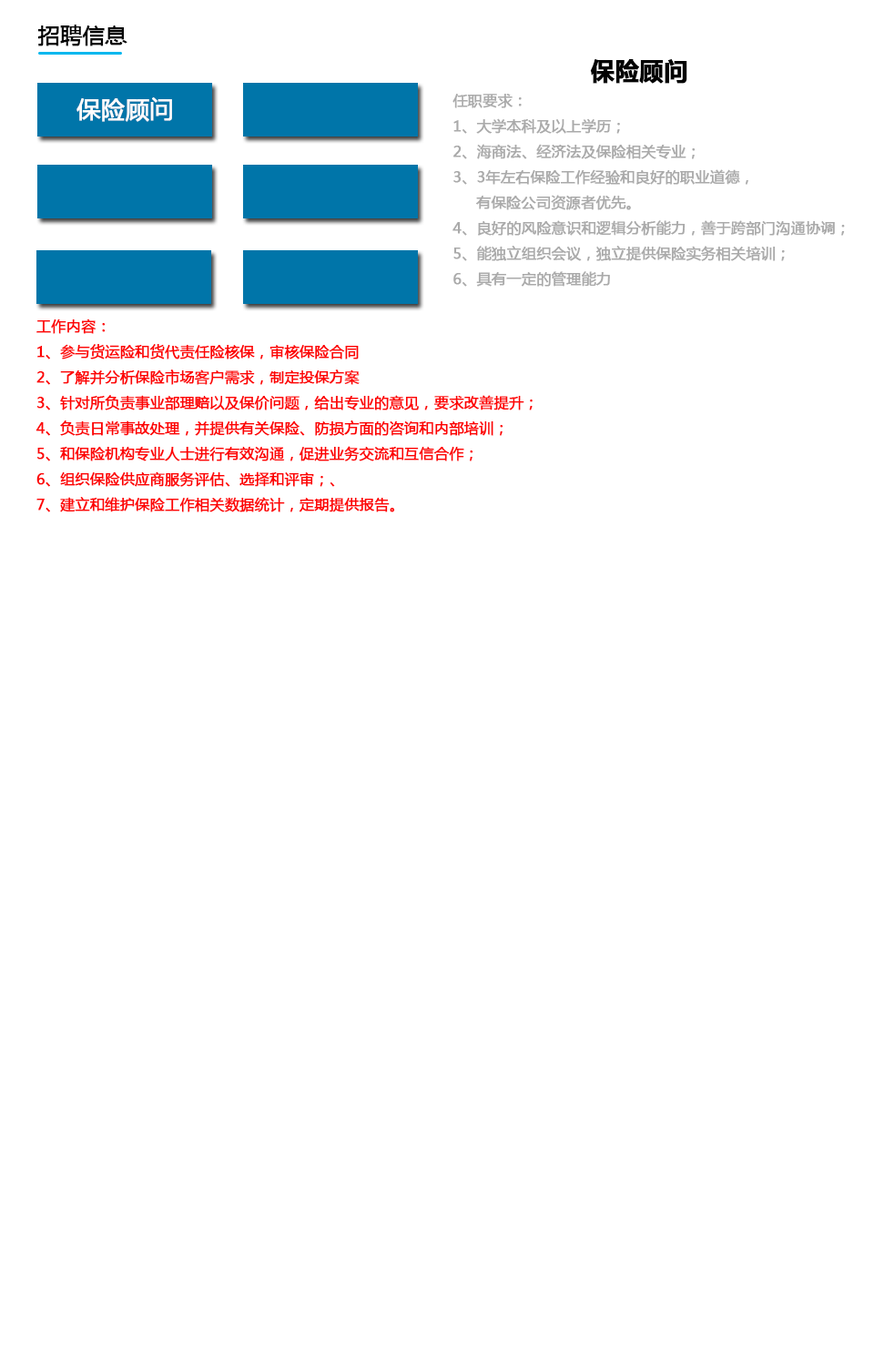
<style>
.page{position:relative;width:874px;height:1365px;background:#ffffff}
.page>*{position:absolute;margin:0}
.t1{font:21.8px "MicrosoftYaHei";color:#020202;font-weight:bold}
.t2{font:23.7px "MicrosoftYaHei-Bold";color:#020202;font-weight:bold}
.t3{font:23.7px "MicrosoftYaHei";color:#fffcfc;font-weight:bold}
.t4{font:14.6px "MicrosoftYaHei";color:#aaaaaa;font-weight:bold}
.t5{font:14.6px "MicrosoftYaHei";color:#fd0202;font-weight:bold}
</style>
<div class="page">
<p class="t1" style="left:37px;top:25px;width:90px;height:21px">招聘信息</p>
<p class="t2" style="left:590px;top:59px;width:97px;height:25px">保险顾问</p>
<p class="t3" style="left:76px;top:97px;width:96px;height:25px">保险顾问</p>
<p class="t4" style="left:452px;top:94px;width:392px;height:193px">任职要求：<br>1、大学本科及以上学历；<br>2、海商法、经济法及保险相关专业；<br>3、3年左右保险工作经验和良好的职业道德，<br>     有保险公司资源者优先。<br>4、良好的风险意识和逻辑分析能力，善于跨部门沟通协调；<br>5、能独立组织会议，独立提供保险实务相关培训；<br>6、具有一定的管理能力</p>
<p class="t5" style="left:35px;top:318px;width:497px;height:194px">工作内容：<br>1、参与货运险和货代责任险核保，审核保险合同<br>2、了解并分析保险市场客户需求，制定投保方案<br>3、针对所负责事业部理赔以及保价问题，给出专业的意见，要求改善提升；<br>4、负责日常事故处理，并提供有关保险、防损方面的咨询和内部培训；<br>5、和保险机构专业人士进行有效沟通，促进业务交流和互信合作；<br>6、组织保险供应商服务评估、选择和评审；、<br>7、建立和维护保险工作相关数据统计，定期提供报告。</p>
</div>
